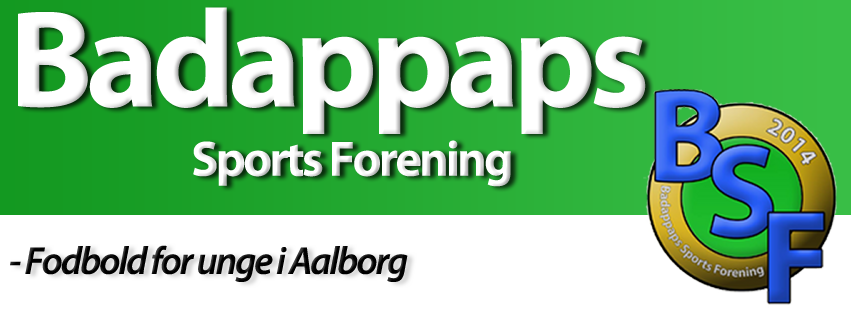
<style>
.page{position:relative;width:851px;height:315px;background:#ffffff}
.page>*{position:absolute;margin:0}
.t1{font:50px/69.4px "MyriadPro-Bold";letter-spacing:-0.05em;color:#ffffff}
.t2{font:138.9px/62.5px "MyriadPro-Bold";letter-spacing:-0.05em;color:#ffffff}
.t3{font:38.9px "MyriadPro-SemiboldIt";letter-spacing:-0.05em;color:#000000}
</style>
<div class="page">
<p class="t1" style="left:18px;top:7px;width:628px;height:180px"><span class="t2">Badappaps<br>                  </span>      Sports Forening</p>
<p class="t3" style="left:10px;top:245px;width:398px;height:37px">- Fodbold for unge i Aalborg</p>
</div>
